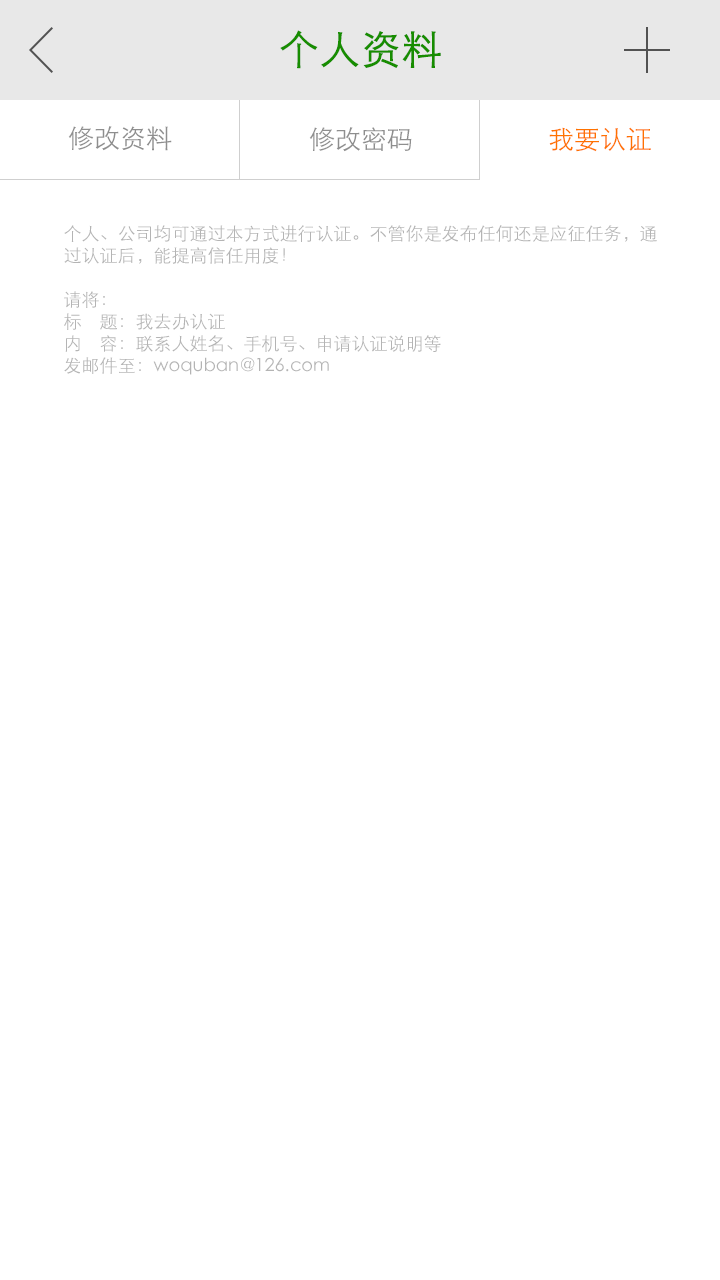
<style>
.page{position:relative;width:720px;height:1280px;background:#ffffff}
.page>*{position:absolute;margin:0}
.t1{font:40px "STXihei";color:#178d00;font-weight:bold}
.t2{font:26px "STXihei";color:#8e8e8e}
.t3{font:26px "STXihei";color:#ff7200}
.t4{font:18px/22px "STXihei";color:#b4b4b4}
</style>
<div class="page">
<p class="t1" style="left:280px;top:30px;width:161px;height:39px">个人资料</p>
<p class="t2" style="left:68px;top:126px;width:104px;height:25px">修改资料</p>
<p class="t2" style="left:309px;top:127px;width:103px;height:25px">修改密码</p>
<p class="t3" style="left:549px;top:127px;width:102px;height:25px">我要认证</p>
<p class="t4" style="left:64px;top:225px;width:593px;height:150px;text-align:justify">个人、公司均可通过本方式进行认证。不管你是发布任何还是应征任务，通<br>过认证后，能提高信任用度！<br><br>请将：<br>标　题：我去办认证<br>内　容：联系人姓名、手机号、申请认证说明等<br>发邮件至：woquban@126.com</p>
</div>
